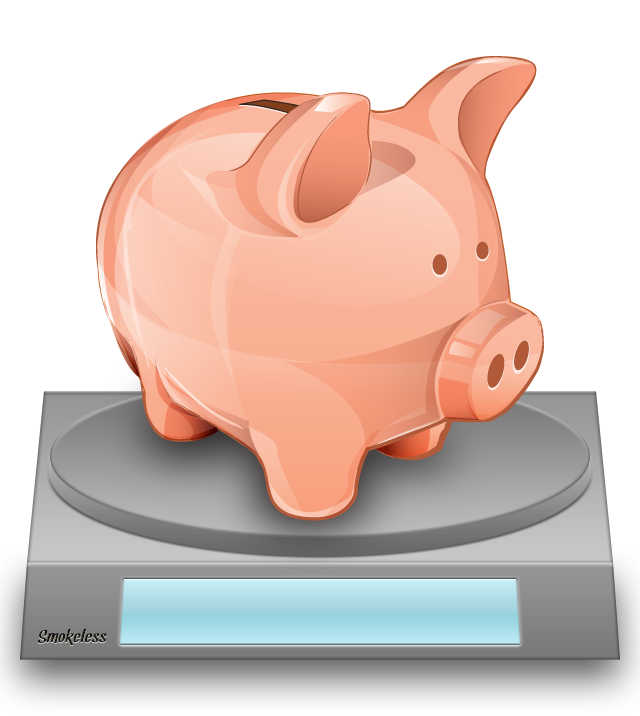
<style>
.page{position:relative;width:640px;height:716px;background:#ffffff}
.page>*{position:absolute;margin:0}
.t1{font:18px "Snickles";letter-spacing:0.025em;color:#2c2813;scale:1.2 1}
</style>
<div class="page">
<p class="t1" style="left:38px;top:628px;width:69px;height:18px">Smokeless</p>
</div>
